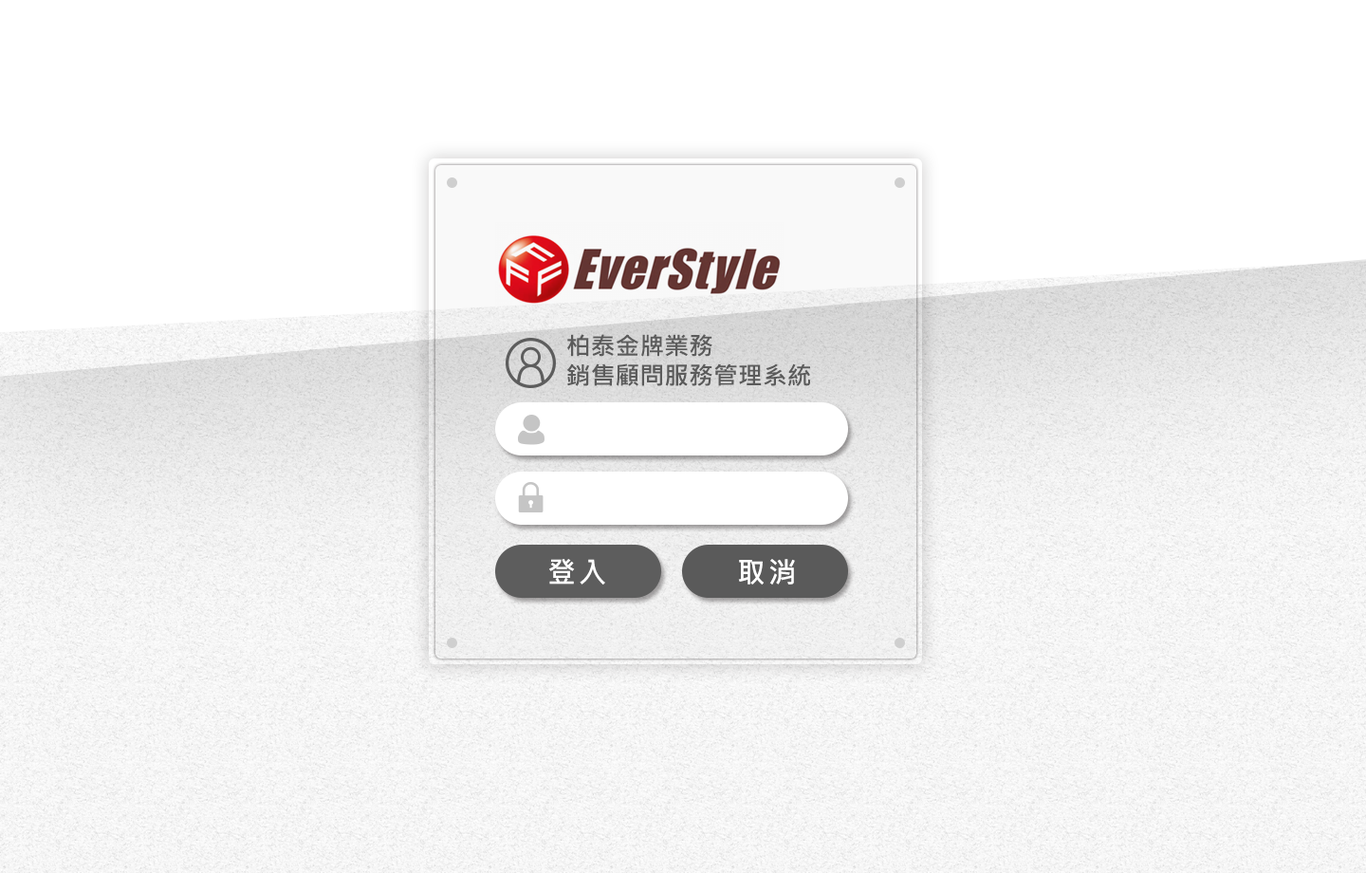
<style>
.page{position:relative;width:1366px;height:873px;background:#ffffff}
.page>*{position:absolute;margin:0}
.t1{font:24.6px "MicrosoftJhengHeiBold";color:#5b5b5b}
.t2{font:28.8px "MicrosoftJhengHeiBold";letter-spacing:0.1em;color:#ffffff}
</style>
<div class="page">
<p class="t1" style="left:567px;top:334px;width:244px;height:52px">柏泰金牌業務<br>銷售顧問服務管理系統</p>
<p class="t2" style="left:549px;top:559px;width:56px;height:25px">登入</p>
<p class="t2" style="left:738px;top:559px;width:57px;height:25px">取消</p>
</div>
